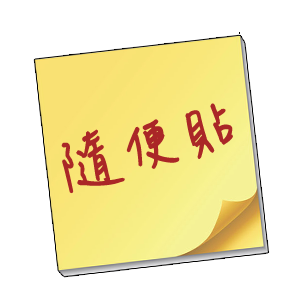
<style>
.page{position:relative;width:300px;height:300px;background:#ffffff}
.page>*{position:absolute;margin:0}
.t1{font:66px "DFHsiu-W3-WIN-BF";color:#aa2727;font-weight:bold;scale:0.91 1}
</style>
<div class="page">
<p class="t1" style="left:61px;top:103px;width:172px;height:91px;rotate:-14deg">隨便貼</p>
</div>
